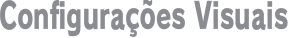
<style>
.page{position:relative;width:288px;height:38px;background:#ffffff}
.page>*{position:absolute;margin:0}
.t1{font:36px "RodinPro-EB";color:#8b8c92;scale:0.69 1}
</style>
<div class="page">
<p class="t1" style="left:0px;top:0px;width:288px;height:37px">Configurações Visuais</p>
</div>
